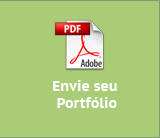
<style>
.page{position:relative;width:160px;height:138px;background:#aacc76}
.page>*{position:absolute;margin:0}
.t1{font:14px "PTSans-CaptionBold";color:#ffffff}
</style>
<div class="page">
<p class="t1" style="left:53px;top:80px;width:64px;height:28px;text-align:center">Envie seu <br>Portfólio</p>
</div>
